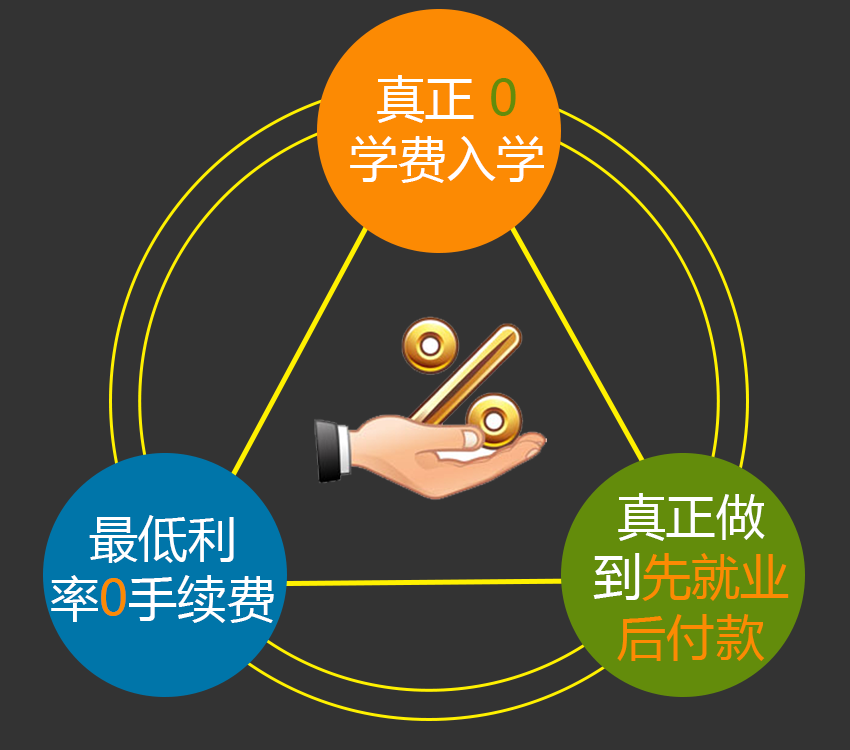
<style>
.page{position:relative;width:850px;height:750px;background:#333333}
.page>*{position:absolute;margin:0}
.t1{font:49.2px/60.6px "MicrosoftYaHei";color:#ffffff;text-transform:uppercase}
.t2{font:49.2px/60.6px "MicrosoftYaHei";color:#638c0b;text-transform:uppercase}
.t3{font:49.2px/60.6px "MicrosoftYaHei";color:#fc8a03;text-transform:uppercase}
</style>
<div class="page">
<p class="t1" style="left:350px;top:75px;width:194px;height:108px;text-align:center">真正 <span class="t2">0<br></span>学费入学</p>
<p class="t3" style="left:593px;top:493px;width:196px;height:168px;text-align:center"><span class="t1">真正做<br>到</span>先就业<br>后付款</p>
<p class="t1" style="left:51px;top:515px;width:223px;height:108px;text-align:center">最低利<br>率<span class="t3">0</span>手续费</p>
</div>
